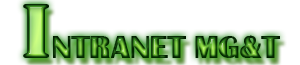
<style>
.page{position:relative;width:300px;height:65px;background:#ffffff}
.page>*{position:absolute;margin:0}
.t1{font:30px "Bastion"}
.t2{font:72px "StencilStd"}
</style>
<div class="page">
<p class="t1" style="left:23px;top:4px;width:257px;height:54px"><span class="t2">I</span>NTRANET MG&amp;T</p>
</div>
